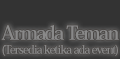
<style>
.page{position:relative;width:120px;height:59px;background:#333333}
.page>*{position:absolute;margin:0}
.t1{font:12px/14px "HeiseiMinStd-W7";letter-spacing:-0.08em;color:#898989}
.t2{font:20px/14px "HeiseiMinStd-W7";letter-spacing:-0.08em;color:#898989}
</style>
<div class="page">
<p class="t1" style="left:1px;top:25px;width:118px;height:31px;text-align:center"><span class="t2">Armada Teman<br></span>(Tersedia ketika ada event)</p>
</div>
